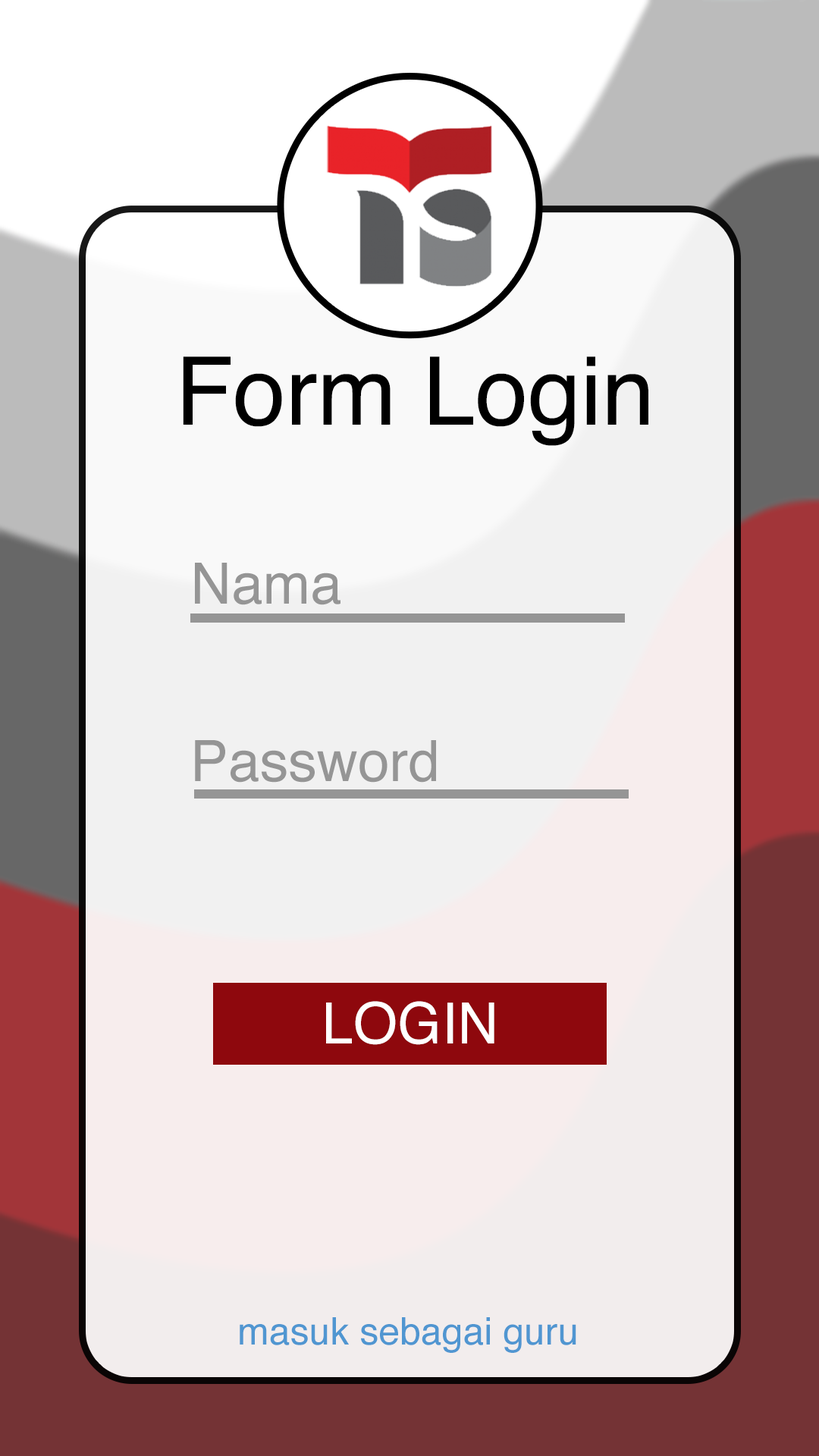
<style>
.page{position:relative;width:819px;height:1456px}
.page>*{position:absolute;margin:0}
.t1{font:94.8px "Helvetica";color:#000000}
.t2{font:56.9px "Helvetica";color:#959595}
.t3{font:56.9px "Helvetica";color:#ffffff}
.t4{font:37.9px "Helvetica";color:#5096d1}
</style>
<div class="page">
<p class="t1" style="left:183px;top:356px;width:465px;height:90px">Form Login</p>
<p class="t2" style="left:195px;top:563px;width:145px;height:42px">Nama</p>
<p class="t2" style="left:195px;top:740px;width:241px;height:43px">Password</p>
<p class="t3" style="left:326px;top:1001px;width:168px;height:44px">LOGIN</p>
<p class="t4" style="left:240px;top:1317px;width:336px;height:36px">masuk sebagai guru</p>
</div>
